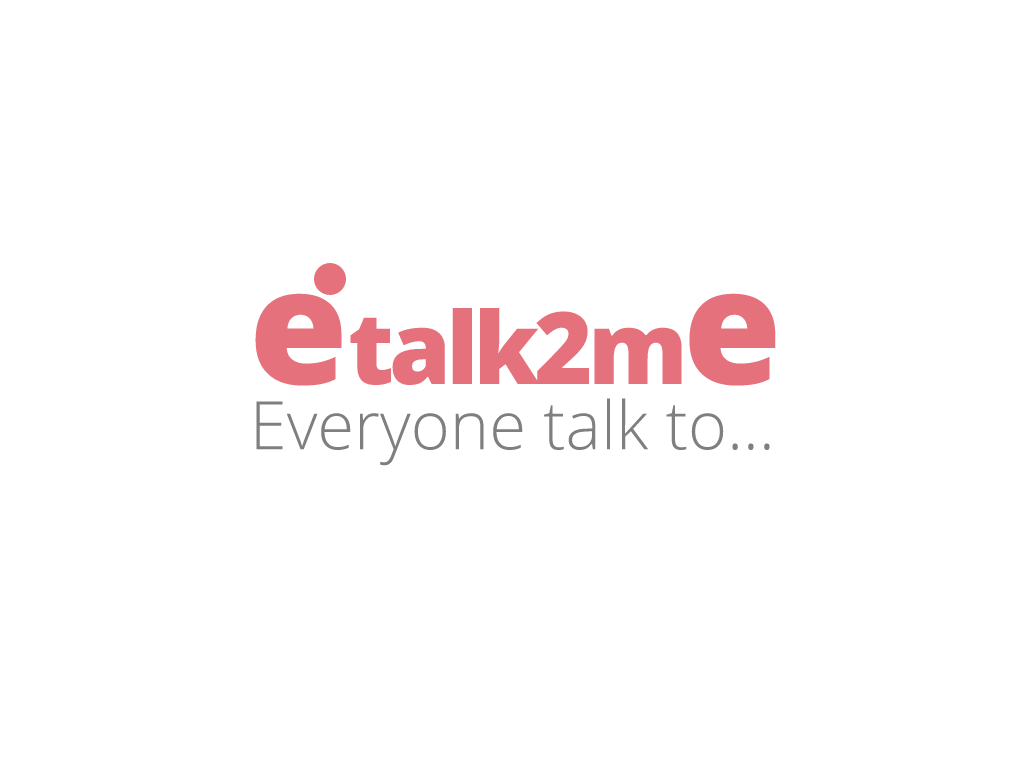
<style>
.page{position:relative;width:1024px;height:768px;background:#ffffff}
.page>*{position:absolute;margin:0}
.t1{font:99.9px "OpenSans-Extrabold";letter-spacing:-0.05em;color:#e5717d}
.t2{font:160px "OpenSans-Extrabold";color:#e5717d}
.t3{font:66.8px "OpenSans-Light";color:#7f7f7f}
</style>
<div class="page">
<p class="t1" style="left:255px;top:293px;width:521px;height:93px"><span class="t2">e</span>talk2m<span class="t2">e</span></p>
<p class="t3" style="left:256px;top:398px;width:514px;height:68px">Everyone talk to...</p>
</div>
